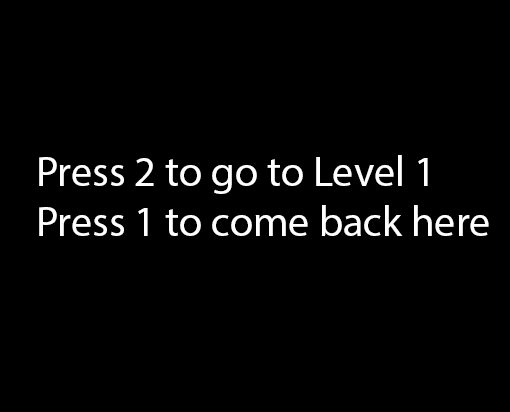
<style>
.page{position:relative;width:510px;height:412px;background:#000000}
.page>*{position:absolute;margin:0}
.t1{font:42.3px "MyriadPro-Regular";color:#ffffff}
</style>
<div class="page">
<p class="t1" style="left:39px;top:155px;width:450px;height:81px">Press 2 to go to Level 1<br>Press 1 to come back here</p>
</div>
